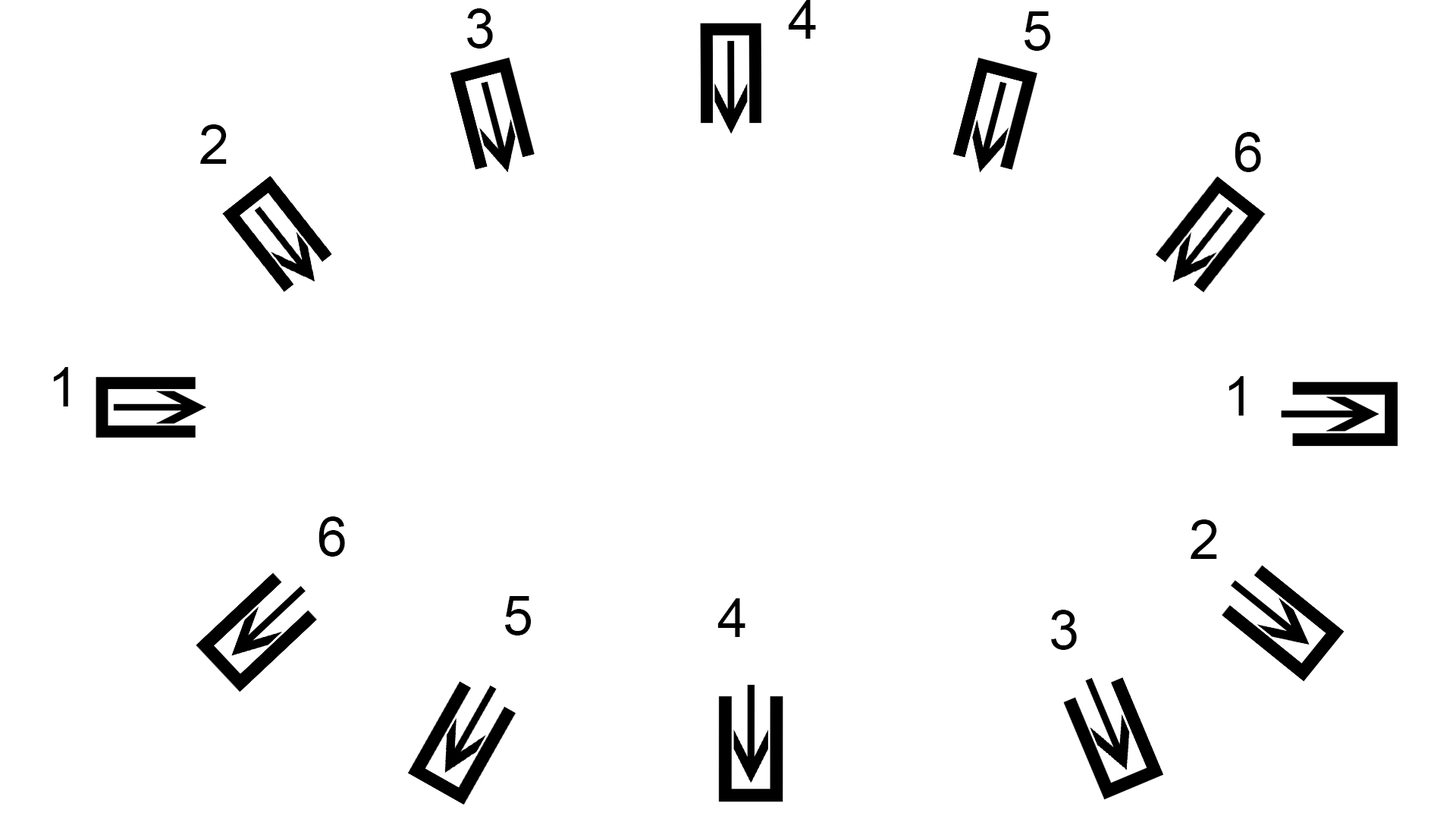
<style>
.page{position:relative;width:1456px;height:819px;background:#ffffff}
.page>*{position:absolute;margin:0}
.t1{font:54.6px "ArialMT";color:#000000}
</style>
<div class="page">
<p class="t1" style="left:788px;top:0px;width:28px;height:39px">4</p>
<p class="t1" style="left:467px;top:8px;width:26px;height:41px">3</p>
<p class="t1" style="left:1024px;top:11px;width:27px;height:40px">5</p>
<p class="t1" style="left:200px;top:124px;width:27px;height:40px">2</p>
<p class="t1" style="left:1235px;top:132px;width:26px;height:40px">6</p>
<p class="t1" style="left:53px;top:367px;width:15px;height:39px">1</p>
<p class="t1" style="left:1228px;top:376px;width:16px;height:40px">1</p>
<p class="t1" style="left:318px;top:516px;width:27px;height:41px">6</p>
<p class="t1" style="left:1191px;top:519px;width:26px;height:40px">2</p>
<p class="t1" style="left:505px;top:596px;width:27px;height:39px">5</p>
<p class="t1" style="left:717px;top:598px;width:28px;height:39px">4</p>
<p class="t1" style="left:1051px;top:610px;width:26px;height:40px">3</p>
</div>
